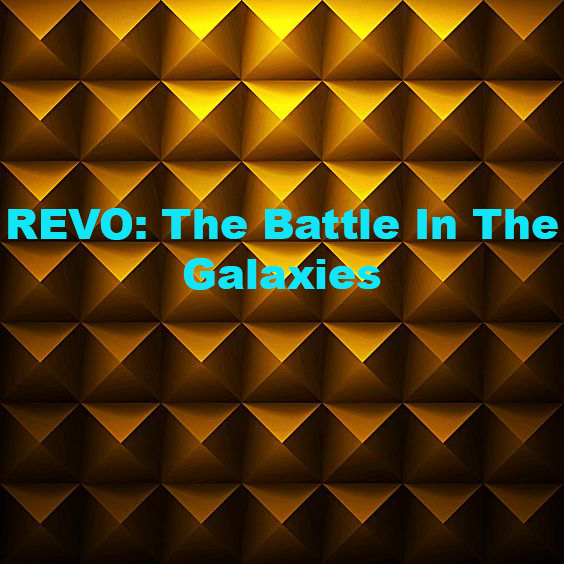
<style>
.page{position:relative;width:564px;height:564px}
.page>*{position:absolute;margin:0}
.t1{font:41.7px "Arial-Black";color:#11e5f8}
</style>
<div class="page">
<p class="t1" style="left:8px;top:208px;width:550px;height:82px;text-align:center">REVO: The Battle In The Galaxies</p>
</div>
